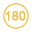
<style>
.page{position:relative;width:32px;height:32px;background:#ffffff}
.page>*{position:absolute;margin:0}
.t1{font:12px "HelveticaNeue";color:#edc051;font-weight:bold}
</style>
<div class="page">
<p class="t1" style="left:5px;top:11px;width:21px;height:10px">180</p>
</div>
